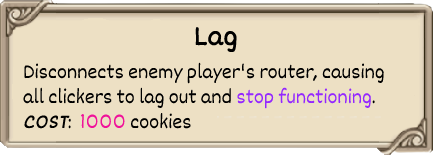
<style>
.page{position:relative;width:433px;height:155px;background:#ede0c4}
.page>*{position:absolute;margin:0}
.t1{font:30px "Dekko";color:#000000;font-weight:bold}
.t2{font:21px "Dekko";color:#000000}
.t3{font:21px "Dekko";color:#9428ff}
.t4{font:21px "Dekko";color:#000000;font-weight:bold;font-style:italic}
.t5{font:21px "Dekko";color:#f0129a}
</style>
<div class="page">
<p class="t1" style="left:195px;top:27px;width:42px;height:26px">Lag</p>
<p class="t2" style="left:23px;top:62px;width:361px;height:67px">Disconnects enemy player's router, causing <br>all clickers to lag out and <span class="t3">stop functioning</span>.<br><span class="t4">COST</span>:  <span class="t5">1000 </span>cookies</p>
</div>
